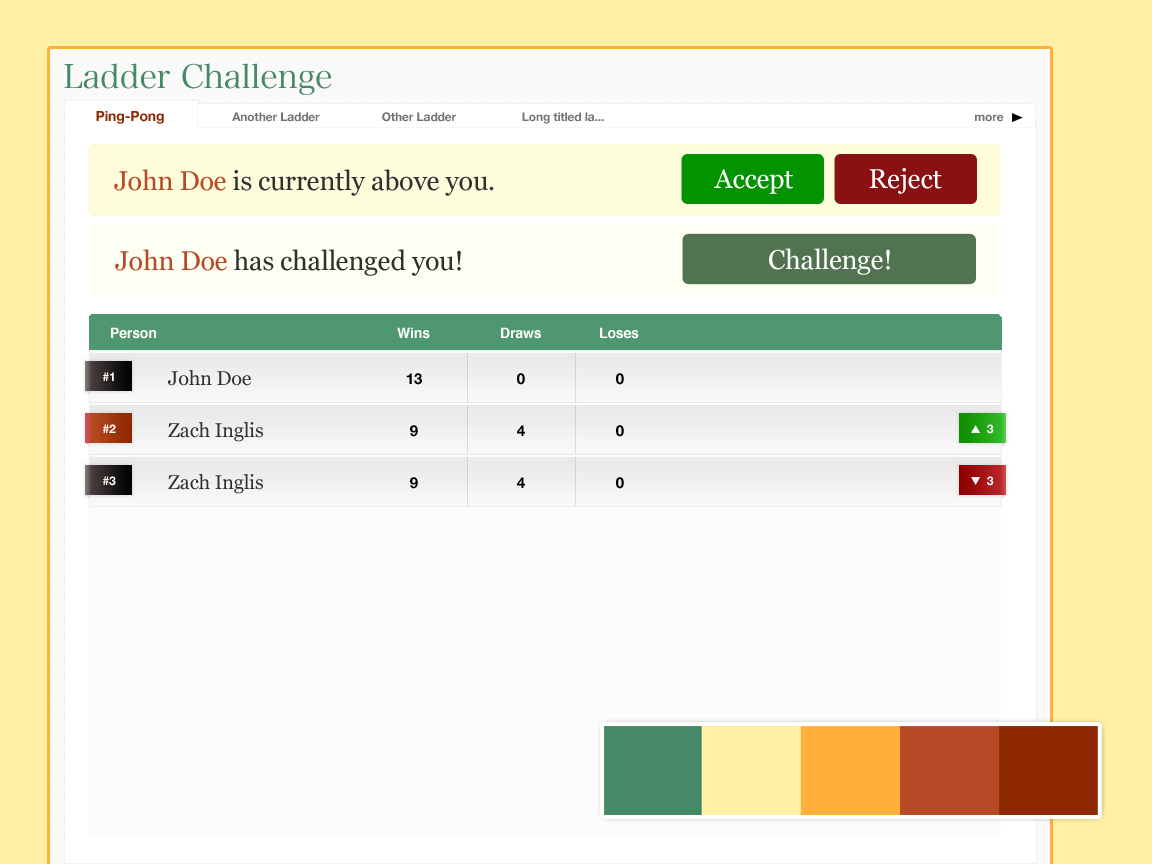
<style>
.page{position:relative;width:1152px;height:864px;background:#fcfcfc}
.page>*{position:absolute;margin:0}
.t1{font:33px "HiraMinPro-W3";letter-spacing:-0.01em;color:#468966}
.t2{font:14px "HelveticaNeue-Bold";letter-spacing:-0.01em;color:#8e2800}
.t3{font:12px "HelveticaNeue-Bold";letter-spacing:-0.01em;color:#737373}
.t4{font:27px "Georgia";letter-spacing:-0.01em;color:#303030}
.t5{font:27px "Georgia";letter-spacing:-0.01em;color:#b64926}
.t6{font:27px "Georgia";letter-spacing:-0.01em;color:#ffffff}
.t7{font:14px "Helvetica-Bold";letter-spacing:-0.01em;color:#fcfcfc}
.t8{font:12px "HelveticaNeue-Bold";letter-spacing:-0.01em;color:#ffffff}
.t9{font:20px "Georgia";letter-spacing:-0.01em;color:#303030}
.t10{font:15px "HelveticaNeue-Bold";letter-spacing:-0.01em;color:#000000}
</style>
<div class="page">
<p class="t1" style="left:64px;top:63px;width:268px;height:32px">Ladder Challenge</p>
<p class="t2" style="left:96px;top:111px;width:68px;height:13px">Ping-Pong</p>
<p class="t3" style="left:232px;top:112px;width:88px;height:10px">Another Ladder</p>
<p class="t3" style="left:382px;top:112px;width:74px;height:10px">Other Ladder</p>
<p class="t3" style="left:522px;top:112px;width:82px;height:12px">Long titled la...</p>
<p class="t3" style="left:975px;top:114px;width:29px;height:8px">more</p>
<p class="t4" style="left:114px;top:169px;width:380px;height:27px"><span class="t5">John Doe</span> is currently above you.</p>
<p class="t6" style="left:714px;top:169px;width:79px;height:25px">Accept</p>
<p class="t6" style="left:869px;top:168px;width:73px;height:26px">Reject</p>
<p class="t4" style="left:115px;top:249px;width:346px;height:27px"><span class="t5">John Doe</span> has challenged you!</p>
<p class="t6" style="left:769px;top:248px;width:121px;height:27px">Challenge!</p>
<p class="t7" style="left:111px;top:327px;width:45px;height:12px">Person</p>
<p class="t7" style="left:397px;top:327px;width:33px;height:12px">Wins</p>
<p class="t7" style="left:501px;top:327px;width:40px;height:12px">Draws</p>
<p class="t7" style="left:600px;top:327px;width:39px;height:12px">Loses</p>
<p class="t8" style="left:103px;top:372px;width:11px;height:9px">#1</p>
<p class="t9" style="left:168px;top:370px;width:83px;height:16px">John Doe</p>
<p class="t10" style="left:406px;top:373px;width:16px;height:12px">13</p>
<p class="t10" style="left:517px;top:373px;width:8px;height:12px">0</p>
<p class="t10" style="left:616px;top:373px;width:8px;height:12px">0</p>
<p class="t8" style="left:103px;top:424px;width:13px;height:9px">#2</p>
<p class="t9" style="left:168px;top:422px;width:95px;height:20px">Zach Inglis</p>
<p class="t10" style="left:410px;top:425px;width:8px;height:12px">9</p>
<p class="t10" style="left:517px;top:425px;width:8px;height:11px">4</p>
<p class="t10" style="left:616px;top:425px;width:8px;height:12px">0</p>
<p class="t8" style="left:987px;top:424px;width:7px;height:10px">3</p>
<p class="t8" style="left:103px;top:476px;width:13px;height:10px">#3</p>
<p class="t9" style="left:168px;top:474px;width:95px;height:20px">Zach Inglis</p>
<p class="t10" style="left:410px;top:477px;width:8px;height:12px">9</p>
<p class="t10" style="left:517px;top:477px;width:8px;height:11px">4</p>
<p class="t10" style="left:616px;top:477px;width:8px;height:12px">0</p>
<p class="t8" style="left:987px;top:476px;width:7px;height:10px">3</p>
</div>
